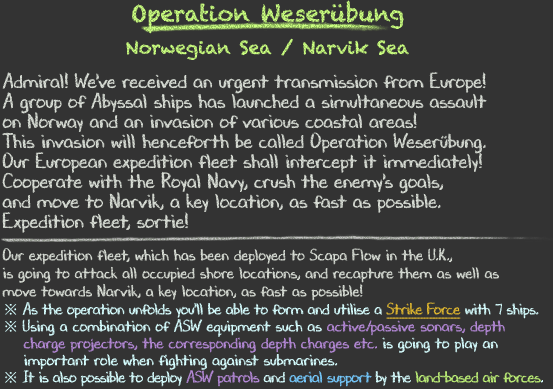
<style>
.page{position:relative;width:553px;height:389px;background:#333333}
.page>*{position:absolute;margin:0}
.t1{font:18px/36px "Chalkduster"}
.t2{font:22px/36px "Chalkduster"}
.t3{font:20px/20px "DJBChalkItUp";color:#d9ded6}
.t4{font:16px/18px "DJBChalkItUp";color:#d9ded6}
.t5{font:16px/17px "TimesNewRomanPSMT";color:#d7feff}
.t6{font:16px/17px "DJBChalkItUp";letter-spacing:-0.02em;color:#d7feff}
.t7{font:16px/17px "DJBChalkItUp";letter-spacing:-0.02em;color:#dfb731;text-decoration:underline}
.t8{font:16px/17px "DJBChalkItUp";color:#d7feff}
.t9{font:16px/17px "DJBChalkItUp";color:#b489d6}
.t10{font:16px/17px "DJBChalkItUp";letter-spacing:-0.03em;color:#d7feff}
.t11{font:16px/17px "DJBChalkItUp";letter-spacing:-0.03em;color:#b489d6}
.t12{font:16px/17px "DJBChalkItUp";letter-spacing:-0.03em;color:#76c8fb}
.t13{font:16px/17px "DJBChalkItUp";letter-spacing:-0.03em;color:#bdef78}
</style>
<div class="page">
<p class="t1" style="left:126px;top:0px;width:283px;height:60px;text-align:center"><span class="t2">Operation Weserübung<br></span>Norwegian Sea / Narvik Sea</p>
<p class="t3" style="left:2px;top:72px;width:541px;height:315px">Admiral! We've received an urgent transmission from Europe!<br>A group of Abyssal ships has launched a simultaneous assault<br>on Norway and an invasion of various coastal areas!<br>This invasion will henceforth be called Operation Weserübung.<br>Our European expedition fleet shall intercept it immediately!<br>Cooperate with the Royal Navy, crush the enemy's goals,<br>and move to Narvik, a key location, as fast as possible.<br>Expedition fleet, sortie!<br><br><span class="t4">Our expedition fleet, which has been deployed to Scapa Flow in the U.K.,<br>is going to attack all occupied shore locations, and recapture them as well as<br>move towards Narvik, a key location, as fast as possible!<br></span><span class="t5">※ </span><span class="t6">As the operation unfolds you'll be able to form and utilise a </span><span class="t7">Strike Force</span><span class="t6"> with 7 ships.<br></span><span class="t5">※ </span><span class="t8">Using a combination of ASW equipment such as </span><span class="t9">active/passive sonars, depth<br>　 charge projectors, the corresponding depth charges etc.</span><span class="t8"> is going to play an<br>　 important role when fighting against submarines.<br></span><span class="t5">※ </span><span class="t10">It is also possible to deploy </span><span class="t11">ASW patrols</span><span class="t10"> and </span><span class="t12">aerial support</span><span class="t10"> by the </span><span class="t13">land-based air forces</span><span class="t10">.</span></p>
</div>
